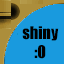
<style>
.page{position:relative;width:64px;height:64px;background:#199ade}
.page>*{position:absolute;margin:0}
.t1{font:16px "Impact";color:#000000}
</style>
<div class="page">
<p class="t1" style="left:22px;top:26px;width:37px;height:33px;text-align:center">shiny<br>:0</p>
</div>
